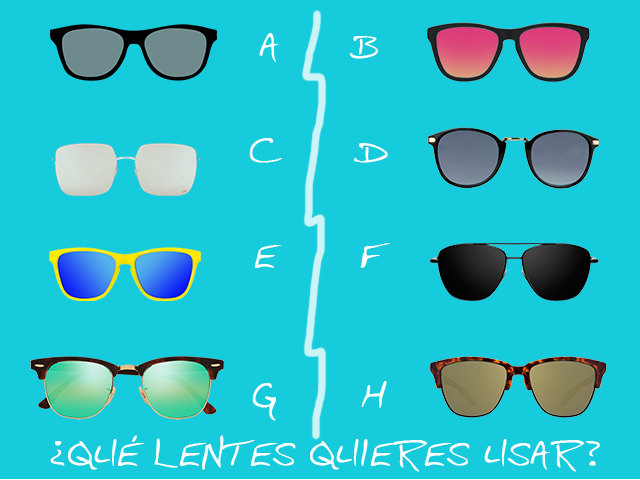
<style>
.page{position:relative;width:640px;height:480px;background:#16ccdc}
.page>*{position:absolute;margin:0}
.t1{font:33px/35px "CartersHand-Plain";color:#ffffff;font-weight:bold}
.t2{font:33.1px "CartersHand-Plain";color:#ffffff;font-weight:bold}
</style>
<div class="page">
<p class="t1" style="left:249px;top:33px;width:141px;height:388px;text-align:center">A     B<br><br><br>C     D<br><br><br>E      F<br><br><br><br>G      H</p>
<p class="t2" style="left:50px;top:435px;width:550px;height:37px">¿QUÉ LENTES QUIERES USAR?</p>
</div>
